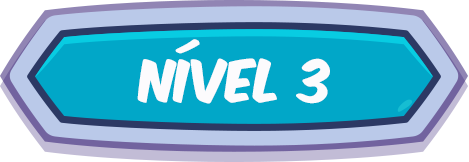
<style>
.page{position:relative;width:469px;height:162px;background:#01a7c8}
.page>*{position:absolute;margin:0}
.t1{font:50px "KomikaAxis";color:#fcfbfd}
</style>
<div class="page">
<p class="t1" style="left:137px;top:39px;width:193px;height:65px">Nível 3</p>
</div>
